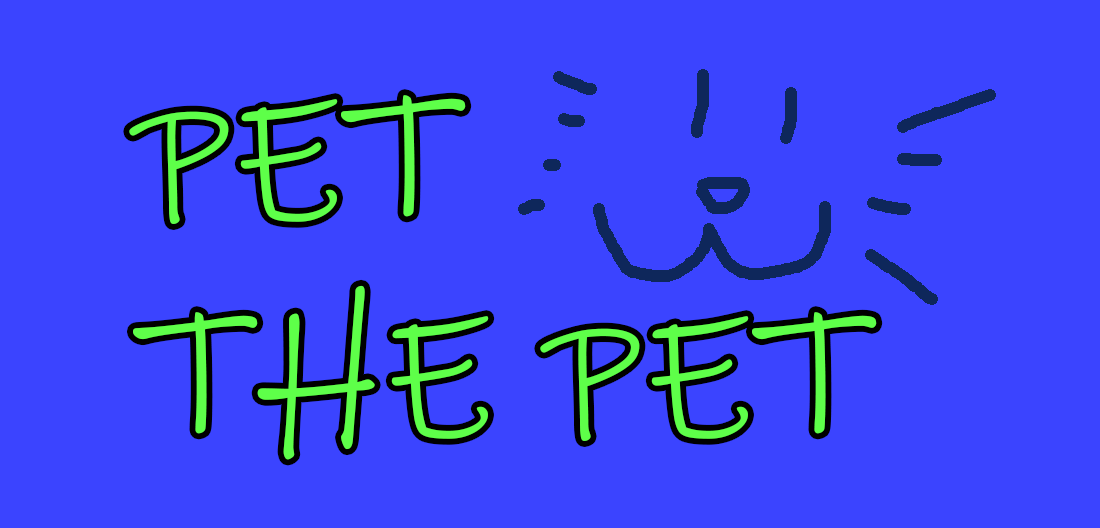
<style>
.page{position:relative;width:1100px;height:528px;background:#3b44ff}
.page>*{position:absolute;margin:0}
.t1{font:181.2px "InkFree";color:#5eff49}
</style>
<div class="page">
<p class="t1" style="left:129px;top:95px;width:748px;height:365px">PET <br>THE PET</p>
</div>
